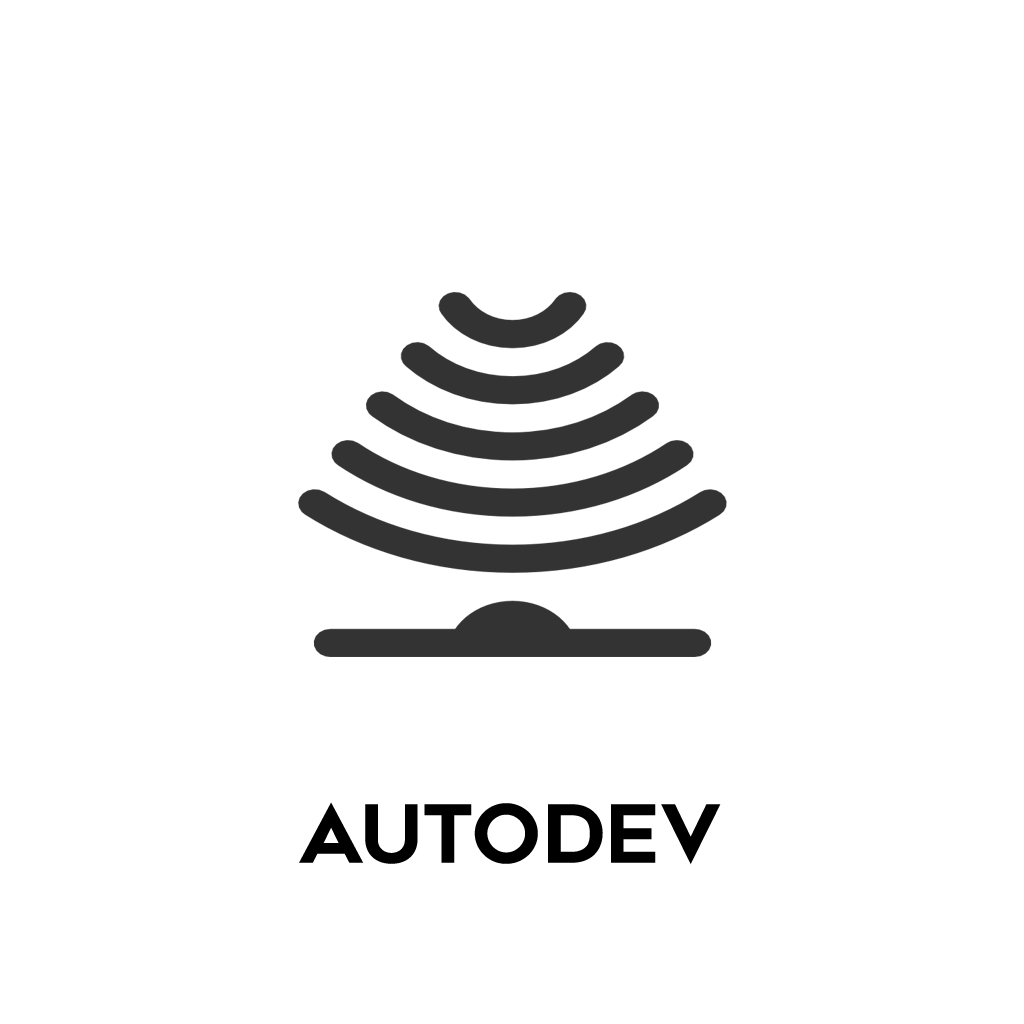
<style>
.page{position:relative;width:1024px;height:1024px;background:#ffffff}
.page>*{position:absolute;margin:0}
.t1{font:80px "Renogare-Regular";color:#000000}
</style>
<div class="page">
<p class="t1" style="left:299px;top:802px;width:422px;height:63px">AUTODEV</p>
</div>
